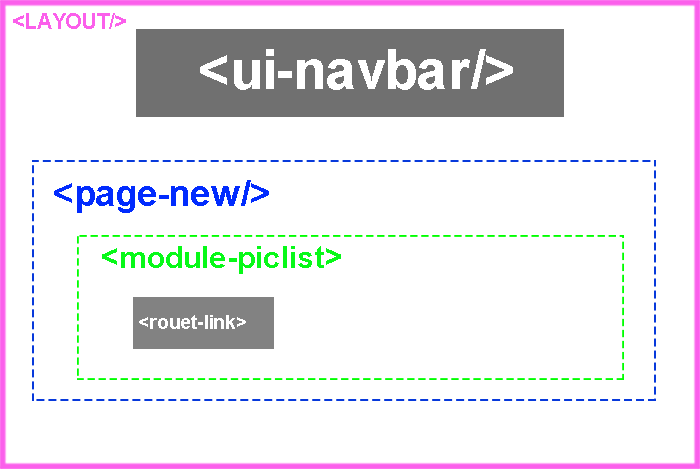
<style>
.page{position:relative;width:700px;height:469px;background:#ffffff}
.page>*{position:absolute;margin:0}
.t1{font:22.1px "Arial-BoldMT";color:#fb5feb;text-transform:uppercase}
.t2{font:54.6px "Arial-BoldMT";color:#ffffff}
.t3{font:35.9px "Arial-BoldMT";color:#012bfe}
.t4{font:31.1px "Arial-BoldMT";color:#07f918}
.t5{font:19.2px "Arial-BoldMT";color:#ffffff}
</style>
<div class="page">
<p class="t1" style="left:13px;top:13px;width:113px;height:16px">&lt;layout/&gt;</p>
<p class="t2" style="left:200px;top:49px;width:313px;height:41px">&lt;ui-navbar/&gt;</p>
<p class="t3" style="left:54px;top:180px;width:215px;height:33px">&lt;page-new/&gt;</p>
<p class="t4" style="left:102px;top:246px;width:239px;height:28px">&lt;module-piclist&gt;</p>
<p class="t5" style="left:139px;top:315px;width:107px;height:14px">&lt;rouet-link&gt;</p>
</div>
